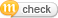
<style>
.page{position:relative;width:58px;height:18px}
.page>*{position:absolute;margin:0}
.t1{font:11px "ArialMT";color:#666666}
</style>
<div class="page">
<p class="t1" style="left:22px;top:5px;width:29px;height:8px">check</p>
</div>
